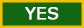
<style>
.page{position:relative;width:84px;height:28px;background:#116712}
.page>*{position:absolute;margin:0}
.t1{font:17px "Verdana";color:#ffffff;font-weight:bold}
</style>
<div class="page">
<p class="t1" style="left:25px;top:7px;width:34px;height:13px">YES</p>
</div>
